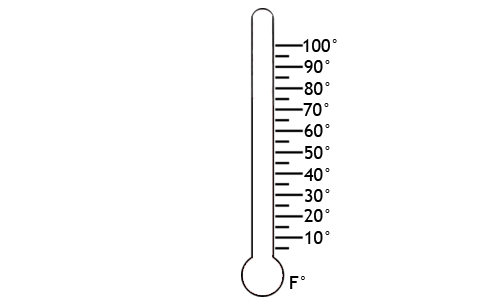
<style>
.page{position:relative;width:500px;height:300px;background:#ffffff}
.page>*{position:absolute;margin:0}
.t1{font:18px "TrebuchetMS";color:#000000}
</style>
<div class="page">
<p class="t1" style="left:303px;top:39px;width:34px;height:13px">100°</p>
<p class="t1" style="left:304px;top:60px;width:26px;height:13px">90°</p>
<p class="t1" style="left:304px;top:82px;width:26px;height:13px">80°</p>
<p class="t1" style="left:303px;top:103px;width:26px;height:13px">70°</p>
<p class="t1" style="left:304px;top:124px;width:26px;height:13px">60°</p>
<p class="t1" style="left:305px;top:146px;width:25px;height:13px">50°</p>
<p class="t1" style="left:304px;top:168px;width:26px;height:13px">40°</p>
<p class="t1" style="left:305px;top:189px;width:25px;height:13px">30°</p>
<p class="t1" style="left:304px;top:209px;width:26px;height:13px">20°</p>
<p class="t1" style="left:305px;top:231px;width:25px;height:13px">10°</p>
<p class="t1" style="left:290px;top:276px;width:15px;height:13px">F°</p>
</div>
